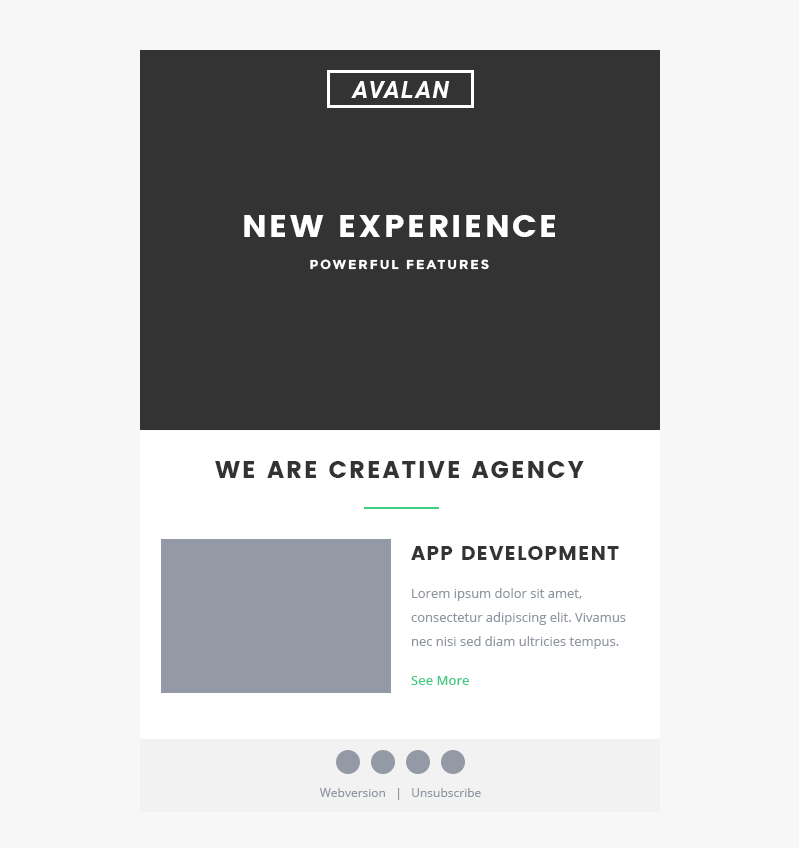
<style>
.page{position:relative;width:800px;height:848px;background:#f7f7f7}
.page>*{position:absolute;margin:0}
.t1{font:32px "Poppins";letter-spacing:0.075em;color:#ffffff}
.t2{font:13px "Montserrat-Bold";letter-spacing:0.15em;color:#ffffff}
.t3{font:24px "Poppins";letter-spacing:0.08em;color:#333333}
.t4{font:20px "Poppins";letter-spacing:0.05em;color:#333333}
.t5{font:13px/24px "OpenSans";color:#8f96a1}
.t6{font:13px "OpenSans-Semibold";color:#44cc84}
.t7{font:12px "OpenSans";color:#8f96a1}
</style>
<div class="page">
<p class="t1" style="left:244px;top:215px;width:311px;height:22px">NEW EXPERIENCE</p>
<p class="t2" style="left:310px;top:259px;width:179px;height:11px">POWERFUL FEATURES</p>
<p class="t3" style="left:215px;top:461px;width:369px;height:17px">WE ARE CREATIVE AGENCY</p>
<p class="t4" style="left:411px;top:546px;width:208px;height:14px">APP DEVELOPMENT</p>
<p class="t5" style="left:411px;top:588px;width:215px;height:61px">Lorem ipsum dolor sit amet, <br>consectetur adipiscing elit. Vivamus nec nisi sed diam ultricies tempus.</p>
<p class="t6" style="left:411px;top:676px;width:58px;height:9px">See More</p>
<p class="t7" style="left:319px;top:788px;width:162px;height:12px">Webversion   |   Unsubscribe</p>
</div>
